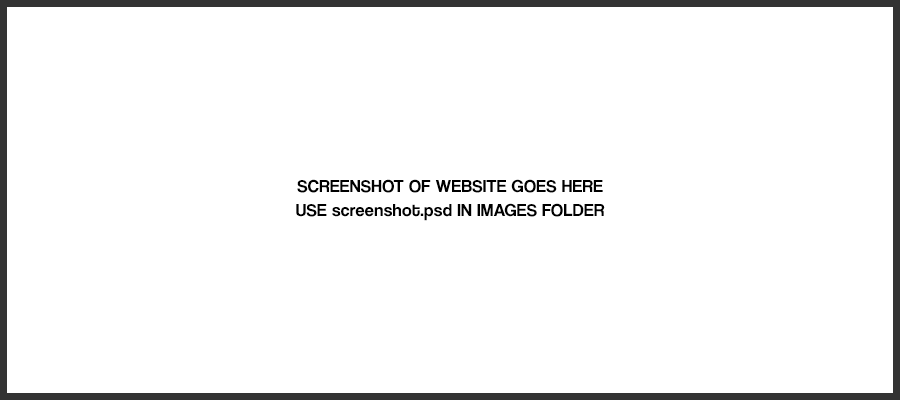
<style>
.page{position:relative;width:900px;height:400px;background:#ffffff}
.page>*{position:absolute;margin:0}
.t1{font:18px/24px "CoolveticaRg-Regular";letter-spacing:0.025em;color:#000000}
</style>
<div class="page">
<p class="t1" style="left:296px;top:179px;width:309px;height:42px;text-align:center">SCREENSHOT OF WEBSITE GOES HERE<br>USE screenshot.psd IN IMAGES FOLDER</p>
</div>
